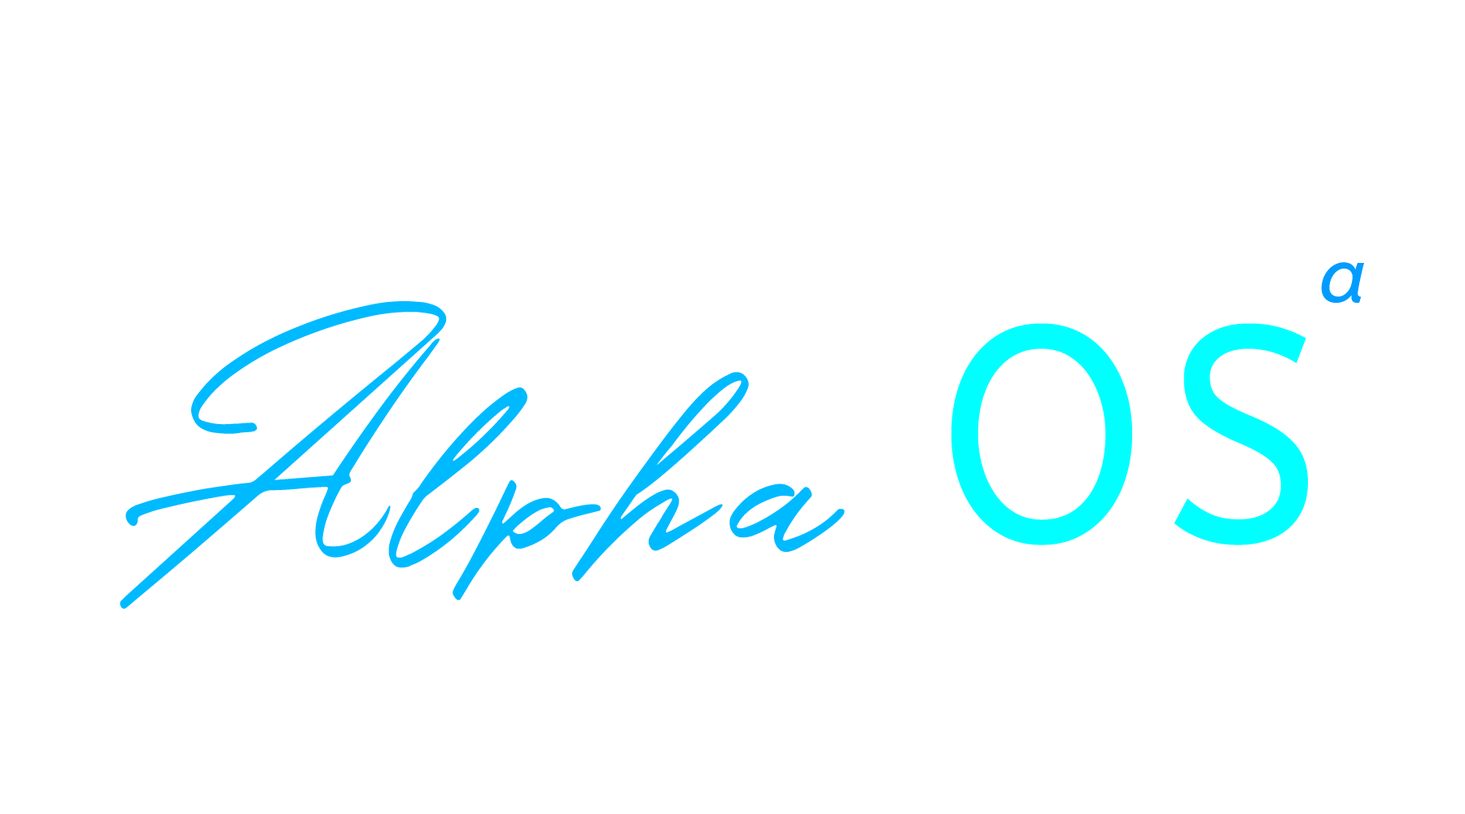
<style>
.page{position:relative;width:1465px;height:814px;background:#ffffff}
.page>*{position:absolute;margin:0}
.t1{font:16.8px "AdobeHeitiStd-Regular";letter-spacing:0.075em;color:#009cff}
.t2{font:73.3px "Holland";letter-spacing:0.075em;color:#00baff;scale:0.89 1}
.t3{font:73.3px "ABeeZee-Regular";letter-spacing:0.075em;color:#00ffff;scale:0.89 1}
</style>
<div class="page">
<p class="t1" style="left:1321px;top:262px;width:43px;height:41px;text-align:center">α</p>
<p class="t2" style="left:120px;top:301px;width:1188px;height:308px;text-align:center">Alpha <span class="t3">OS</span></p>
</div>
